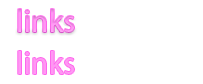
<style>
.page{position:relative;width:203px;height:84px;background:#ffffff}
.page>*{position:absolute;margin:0}
.t1{font:31.5px "MyriadPro-Regular";color:#ff98f3}
</style>
<div class="page">
<p class="t1" style="left:18px;top:9px;width:56px;height:23px">links</p>
</div>
